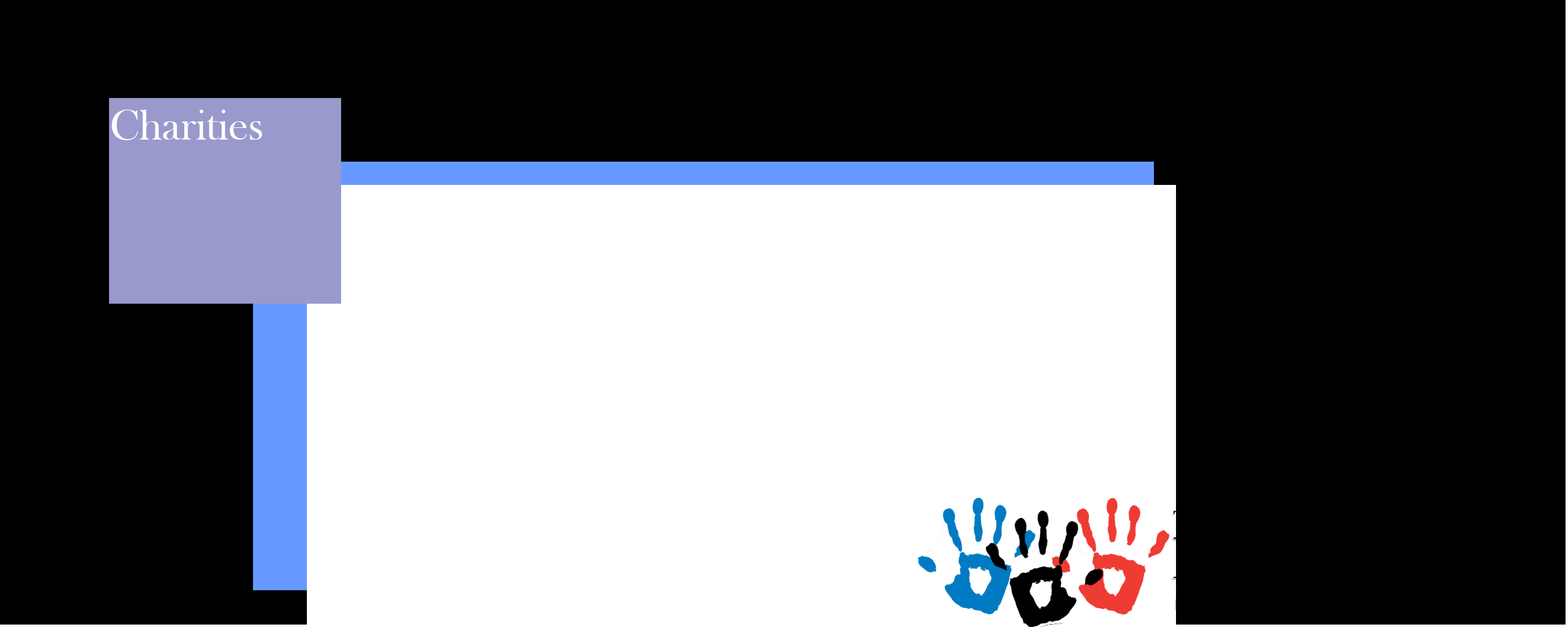
<style>
.page{position:relative;width:1568px;height:627px;background:#000000}
.page>*{position:absolute;margin:0}
.t1{font:44.1px "BaskOldFace";color:#ffffff}
</style>
<div class="page">
<p class="t1" style="left:111px;top:110px;width:151px;height:30px">Charities</p>
</div>
